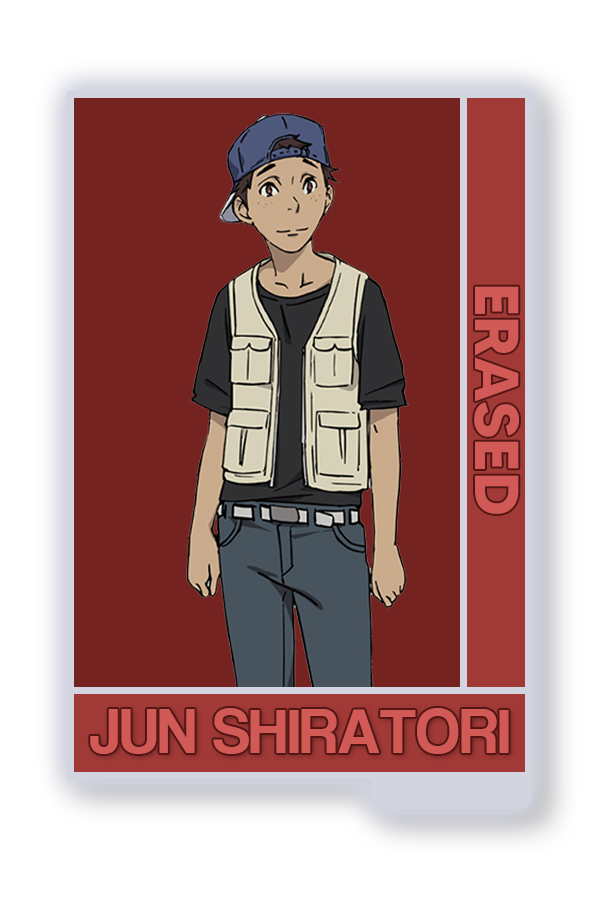
<style>
.page{position:relative;width:600px;height:900px;background:#742320}
.page>*{position:absolute;margin:0}
.t1{font:61.9px "MADETOMMY-Bold";color:#d15a56}
.t2{font:65.4px "CoolveticaRg-Regular";color:#d15a56}
</style>
<div class="page">
<p class="t1" style="left:474px;top:286px;width:45px;height:228px;rotate:90deg">ERASED</p>
<p class="t2" style="left:90px;top:708px;width:419px;height:46px">JUN SHIRATORI</p>
</div>
